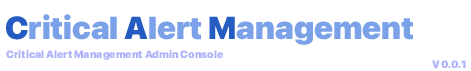
<style>
.page{position:relative;width:471px;height:71px;background:#ffffff}
.page>*{position:absolute;margin:0}
.t1{font:31.8px "SFProDisplay-Black";color:#7ba1e8}
.t2{font:31.8px "SFProDisplay-Black";color:#245cc1}
.t3{font:10.6px "SFProDisplay-Black";color:#afb3fa}
</style>
<div class="page">
<p class="t1" style="left:6px;top:14px;width:407px;height:31px"><span class="t2">C</span>ritical<span class="t2"> A</span>lert<span class="t2"> M</span>anagement</p>
<p class="t3" style="left:6px;top:49px;width:217px;height:11px">Critical Alert Management Admin Console</p>
<p class="t3" style="left:432px;top:60px;width:34px;height:9px">V 0.0.1</p>
</div>
